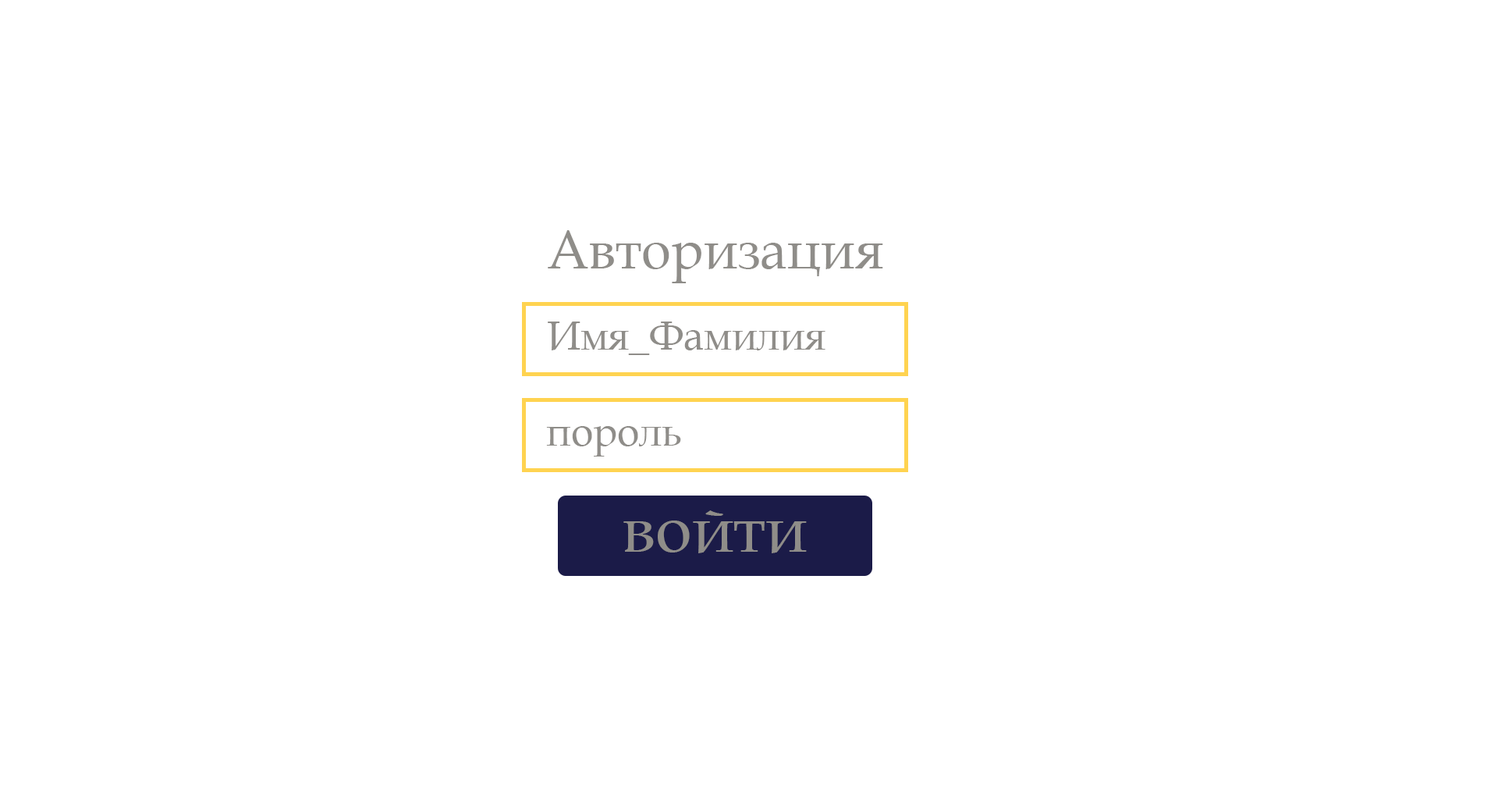
<style>
.page{position:relative;width:1498px;height:796px;background:#ffffff}
.page>*{position:absolute;margin:0}
.t1{font:54.2px "BookAntiqua";color:#8f8d89}
.t2{font:40.2px "BookAntiqua";color:#8f8d89}
.t3{font:66.5px "BookAntiqua";color:#8f8d89}
</style>
<div class="page">
<p class="t1" style="left:548px;top:230px;width:335px;height:53px">Авторизация</p>
<p class="t2" style="left:548px;top:321px;width:278px;height:34px">Имя_Фамилия</p>
<p class="t2" style="left:546px;top:426px;width:135px;height:30px">пороль</p>
<p class="t3" style="left:623px;top:510px;width:184px;height:43px">войти</p>
</div>
